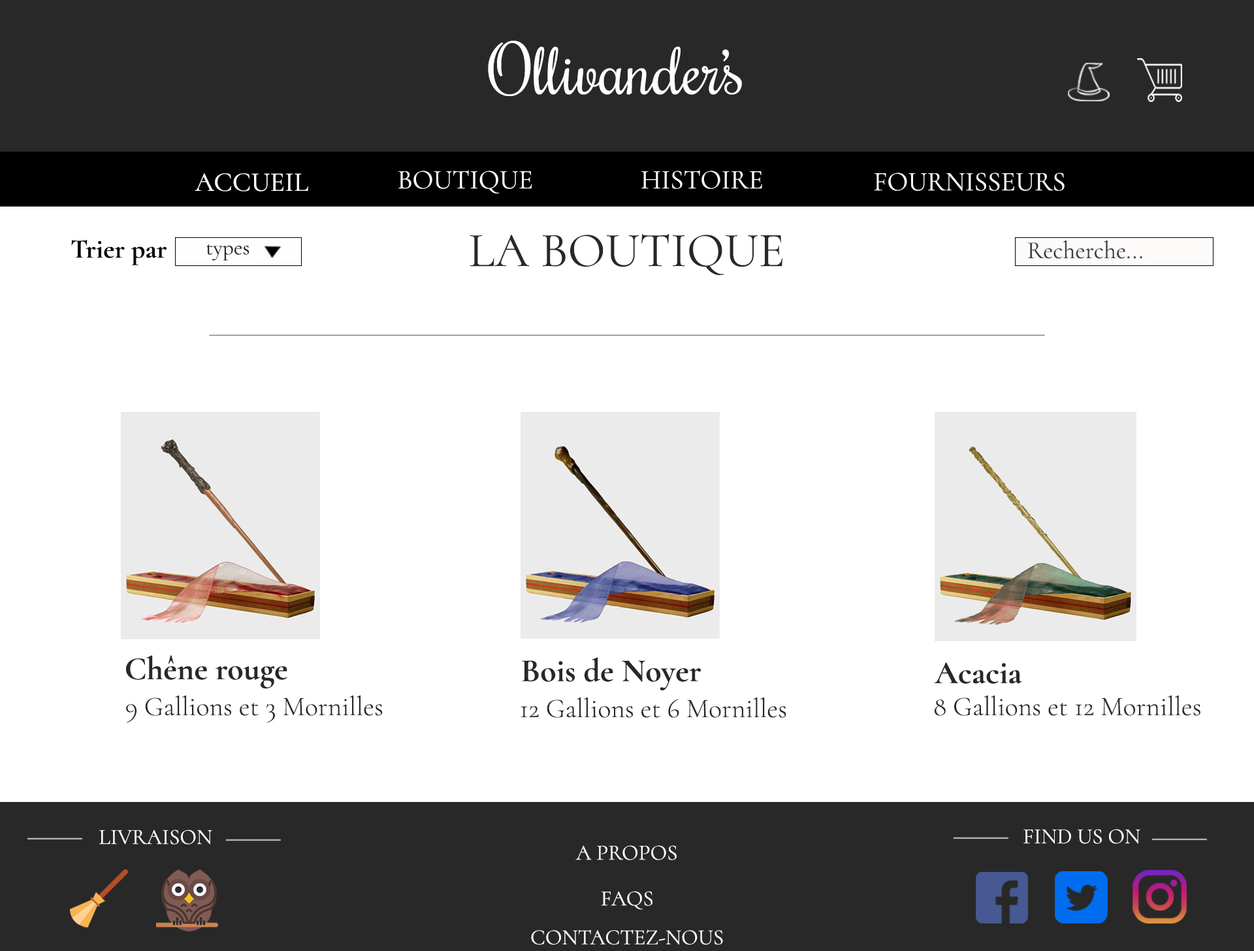
<style>
.page{position:relative;width:1254px;height:951px;background:#ffffff}
.page>*{position:absolute;margin:0}
.t1{font:65.3px "Rochester-Regular";color:#ffffff}
.t2{font:27.2px "CormorantGaramond-Medium";color:#ffffff}
.t3{font:27.2px "CormorantGaramond-Regular";color:#ffffff}
.t4{font:49px "CormorantGaramond-Regular";color:#282828}
.t5{font:27.2px "CormorantGaramond-Bold";color:#070707}
.t6{font:21.8px "CormorantGaramond-Regular";color:#282828}
.t7{font:24.5px "CormorantGaramond-Regular";color:#413f3f}
.t8{font:32.7px "CormorantGaramond-Bold";color:#282828}
.t9{font:27.2px "CormorantGaramond-Light";color:#282828}
.t10{font:21.8px "CormorantGaramond-Regular";color:#ffffff}
</style>
<div class="page">
<p class="t1" style="left:488px;top:41px;width:254px;height:55px">Ollivander’s</p>
<p class="t2" style="left:195px;top:173px;width:113px;height:18px">ACCUEIL</p>
<p class="t3" style="left:399px;top:170px;width:133px;height:23px">BOUTIQUE</p>
<p class="t3" style="left:642px;top:170px;width:120px;height:19px">HISTOIRE</p>
<p class="t3" style="left:874px;top:172px;width:191px;height:19px">FOURNISSEURS</p>
<p class="t4" style="left:470px;top:233px;width:313px;height:42px">LA BOUTIQUE</p>
<p class="t5" style="left:71px;top:239px;width:96px;height:26px">Trier par</p>
<p class="t6" style="left:206px;top:244px;width:44px;height:17px">types</p>
<p class="t7" style="left:1028px;top:240px;width:115px;height:19px">Recherche...</p>
<p class="t8" style="left:126px;top:655px;width:161px;height:34px">Chêne rouge</p>
<p class="t8" style="left:522px;top:657px;width:180px;height:34px">Bois de Noyer</p>
<p class="t8" style="left:934px;top:662px;width:88px;height:21px">Acacia</p>
<p class="t9" style="left:126px;top:694px;width:257px;height:29px">9 Gallions et 3 Mornilles</p>
<p class="t9" style="left:521px;top:696px;width:266px;height:21px">12 Gallions et 6 Mornilles</p>
<p class="t9" style="left:934px;top:694px;width:267px;height:21px">8 Gallions et 12 Mornilles</p>
<p class="t10" style="left:99px;top:829px;width:113px;height:15px">LIVRAISON</p>
<p class="t10" style="left:1024px;top:828px;width:117px;height:15px">FIND US ON</p>
<p class="t10" style="left:576px;top:845px;width:101px;height:15px">A PROPOS</p>
<p class="t10" style="left:601px;top:890px;width:52px;height:19px">FAQS</p>
<p class="t10" style="left:531px;top:929px;width:192px;height:16px">CONTACTEZ-NOUS</p>
</div>
